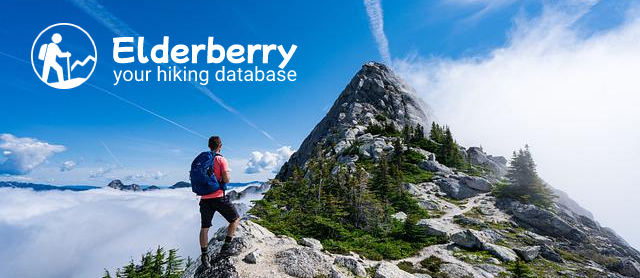
<style>
.page{position:relative;width:640px;height:278px}
.page>*{position:absolute;margin:0}
.t1{font:30px "MochiyPopOne-Regular";color:#ffffff}
.t2{font:20px "Roboto-Regular";color:#ffffff}
</style>
<div class="page">
<p class="t1" style="left:112px;top:36px;width:186px;height:34px">Elderberry</p>
<p class="t2" style="left:113px;top:66px;width:184px;height:20px">your hiking database</p>
</div>
